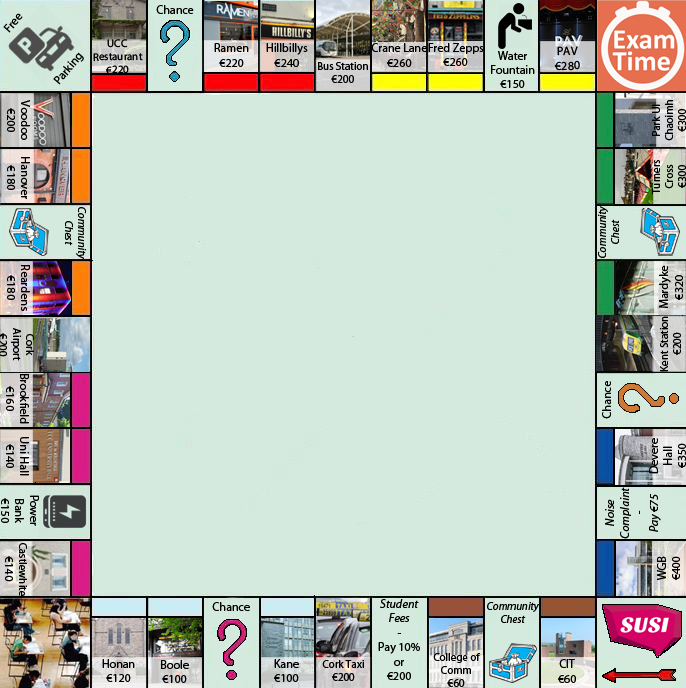
<style>
.page{position:relative;width:686px;height:688px;background:#d4eade}
.page>*{position:absolute;margin:0}
.t1{font:12px "MyriadPro-Regular";color:#000000}
.t2{font:11px "MyriadPro-Regular";color:#000000}
.t3{font:11px "MyriadPro-It";color:#000000}
.t4{font:12px "MyriadPro-Regular";color:#010101}
.t5{font:12px "MyriadPro-It";color:#000000}
</style>
<div class="page">
<p class="t1" style="left:156px;top:5px;width:38px;height:9px">Chance</p>
<p class="t1" style="left:3px;top:13px;width:20px;height:20px;rotate:-49deg">Free</p>
<p class="t2" style="left:93px;top:39px;width:50px;height:36px;text-align:center;rotate:-1deg">UCC<br>Restaurant<br>€220</p>
<p class="t1" style="left:53px;top:52px;width:31px;height:33px;rotate:-49deg">Parking</p>
<p class="t1" style="left:214px;top:43px;width:35px;height:24px;text-align:center">Ramen<br>€220</p>
<p class="t1" style="left:266px;top:43px;width:42px;height:24px;text-align:center">Hillbillys<br>€240</p>
<p class="t1" style="left:371px;top:43px;width:56px;height:24px;text-align:center">Crane Lane<br>€260</p>
<p class="t1" style="left:428px;top:43px;width:56px;height:23px;text-align:center">Fred Zepps<br>€260</p>
<p class="t1" style="left:491px;top:51px;width:44px;height:37px;text-align:center">Water<br>Fountain<br>€150</p>
<p class="t1" style="left:554px;top:46px;width:26px;height:25px;text-align:center;rotate:-1deg">PAV<br>€280</p>
<p class="t2" style="left:318px;top:62px;width:50px;height:21px;text-align:center">Bus Station<br>€200</p>
<p class="t1" style="left:7px;top:100px;width:23px;height:40px;text-align:center;rotate:90deg">Voodoo<br>€200</p>
<p class="t2" style="left:652px;top:100px;width:34px;height:41px;text-align:center;rotate:-90deg">Park UI Chaoimh<br>€300</p>
<p class="t1" style="left:7px;top:157px;width:23px;height:42px;text-align:center;rotate:90deg">Hanover<br>€180</p>
<p class="t2" style="left:652px;top:160px;width:34px;height:35px;text-align:center;rotate:-90deg">Turners<br>Cross<br>€300</p>
<p class="t3" style="left:65px;top:207px;width:21px;height:52px;rotate:90deg">Community Chest</p>
<p class="t3" style="left:598px;top:206px;width:21px;height:52px;rotate:-90deg">Community Chest</p>
<p class="t4" style="left:7px;top:265px;width:23px;height:46px;text-align:center;rotate:90deg">Reardens<br>€180</p>
<p class="t1" style="left:659px;top:265px;width:24px;height:43px;text-align:center;rotate:-90deg">Mardyke<br>€320</p>
<p class="t2" style="left:660px;top:316px;width:21px;height:56px;text-align:center;rotate:-90deg">Kent Station<br>€200</p>
<p class="t2" style="left:0px;top:328px;width:34px;height:33px;text-align:center;rotate:90deg">Cork<br>Airport<br>€200</p>
<p class="t1" style="left:6px;top:374px;width:23px;height:50px;text-align:center;rotate:90deg">Brookfield<br>€160</p>
<p class="t1" style="left:602px;top:381px;width:9px;height:38px;rotate:-90deg">Chance</p>
<p class="t1" style="left:6px;top:437px;width:23px;height:39px;text-align:center;rotate:90deg">Uni Hall<br>€140</p>
<p class="t1" style="left:649px;top:438px;width:37px;height:36px;text-align:center;rotate:-90deg">Devere Hall<br>€350</p>
<p class="t1" style="left:1px;top:495px;width:38px;height:31px;text-align:center;rotate:90deg">Power <br>Bank<br>€150</p>
<p class="t5" style="left:605px;top:487px;width:56px;height:52px;text-align:center;rotate:-90deg">Noise <br>Complaint<br>-<br>Pay €75</p>
<p class="t2" style="left:5px;top:543px;width:22px;height:53px;text-align:center;rotate:90deg">Castlewhite<br><span class="t1">€140</span></p>
<p class="t1" style="left:657px;top:556px;width:23px;height:25px;text-align:center;rotate:-90deg">WGB<br>€400</p>
<p class="t1" style="left:212px;top:602px;width:38px;height:9px">Chance</p>
<p class="t1" style="left:378px;top:599px;width:42px;height:81px;text-align:center"><span class="t5">Student<br>Fees<br></span>-<br>Pay 10%<br>or<br>€200</p>
<p class="t3" style="left:487px;top:602px;width:52px;height:21px;text-align:center">Community Chest</p>
<p class="t2" style="left:433px;top:653px;width:47px;height:34px;text-align:center">College of Comm<br>€60</p>
<p class="t1" style="left:102px;top:659px;width:33px;height:23px;text-align:center">Honan<br>€120</p>
<p class="t1" style="left:161px;top:660px;width:28px;height:23px;text-align:center">Boole<br>€100</p>
<p class="t1" style="left:274px;top:659px;width:25px;height:23px;text-align:center">Kane <br>€100</p>
<p class="t2" style="left:322px;top:660px;width:42px;height:21px;text-align:center">Cork Taxi<br>€200</p>
<p class="t1" style="left:558px;top:659px;width:18px;height:24px;text-align:center">CIT<br>€60</p>
</div>
